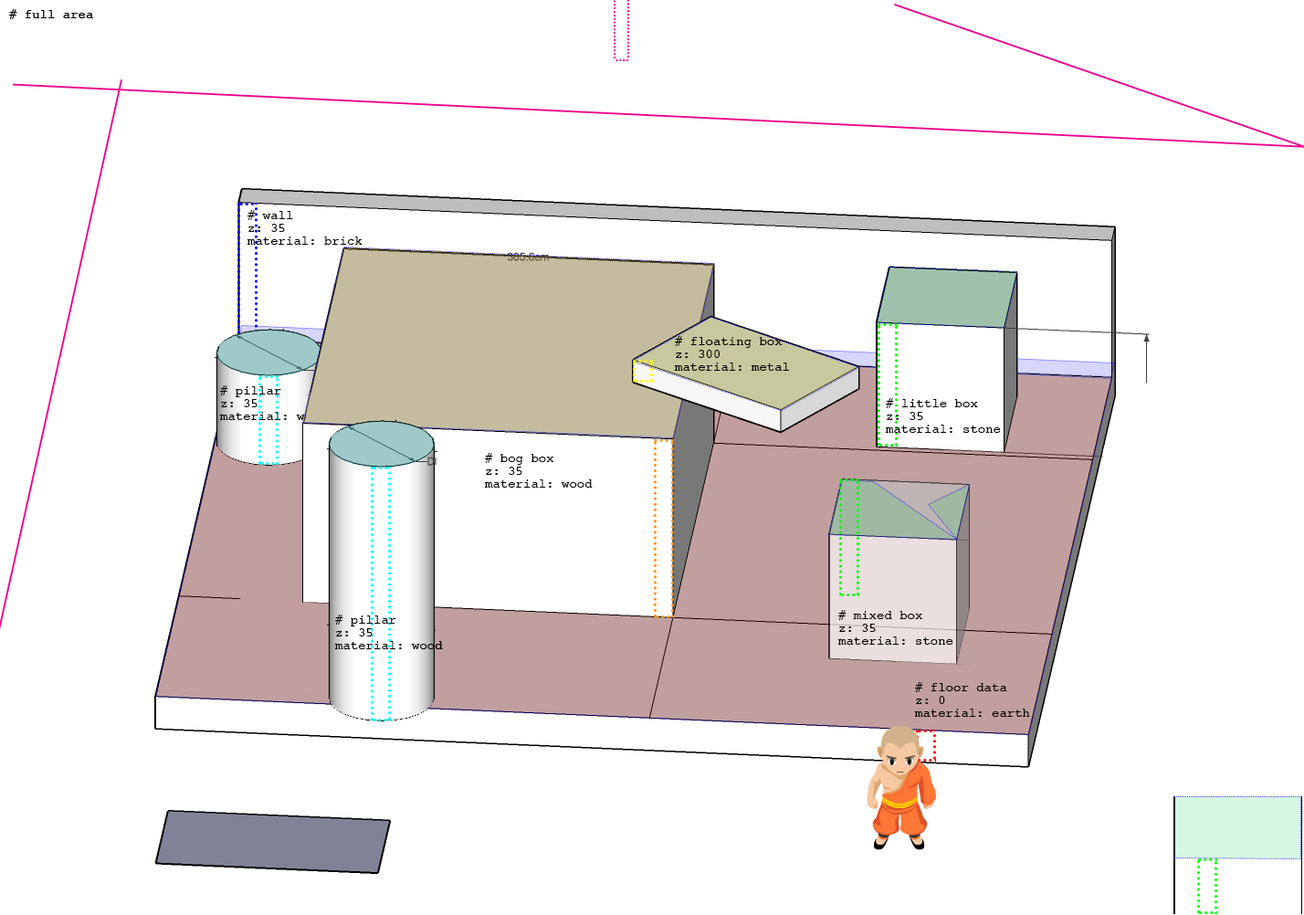
<style>
.page{position:relative;width:1304px;height:915px;background:#ffffff}
.page>*{position:absolute;margin:0}
.t1{font:12.8px "Courier";color:#000000}
.t2{font:12.8px/12.8px "Courier";color:#000000}
</style>
<div class="page">
<p class="t1" style="left:8px;top:9px;width:85px;height:10px"># full area</p>
<p class="t2" style="left:246px;top:210px;width:116px;height:35px"># wall<br>z: 35<br>material: brick</p>
<p class="t2" style="left:674px;top:336px;width:115px;height:35px"># floating box<br>z: 300<br>material: metal</p>
<p class="t2" style="left:219px;top:385px;width:109px;height:35px"># pillar<br>z: 35<br>material: wood</p>
<p class="t2" style="left:885px;top:398px;width:116px;height:35px"># little box<br>z: 35<br>material: stone</p>
<p class="t2" style="left:484px;top:453px;width:108px;height:34px"># bog box<br>z: 35<br>material: wood</p>
<p class="t2" style="left:334px;top:614px;width:109px;height:35px"># pillar<br>z: 35<br>material: wood</p>
<p class="t2" style="left:837px;top:610px;width:116px;height:35px"># mixed box<br>z: 35<br>material: stone</p>
<p class="t2" style="left:914px;top:682px;width:116px;height:35px"># floor data<br>z: 0<br>material: earth</p>
</div>
